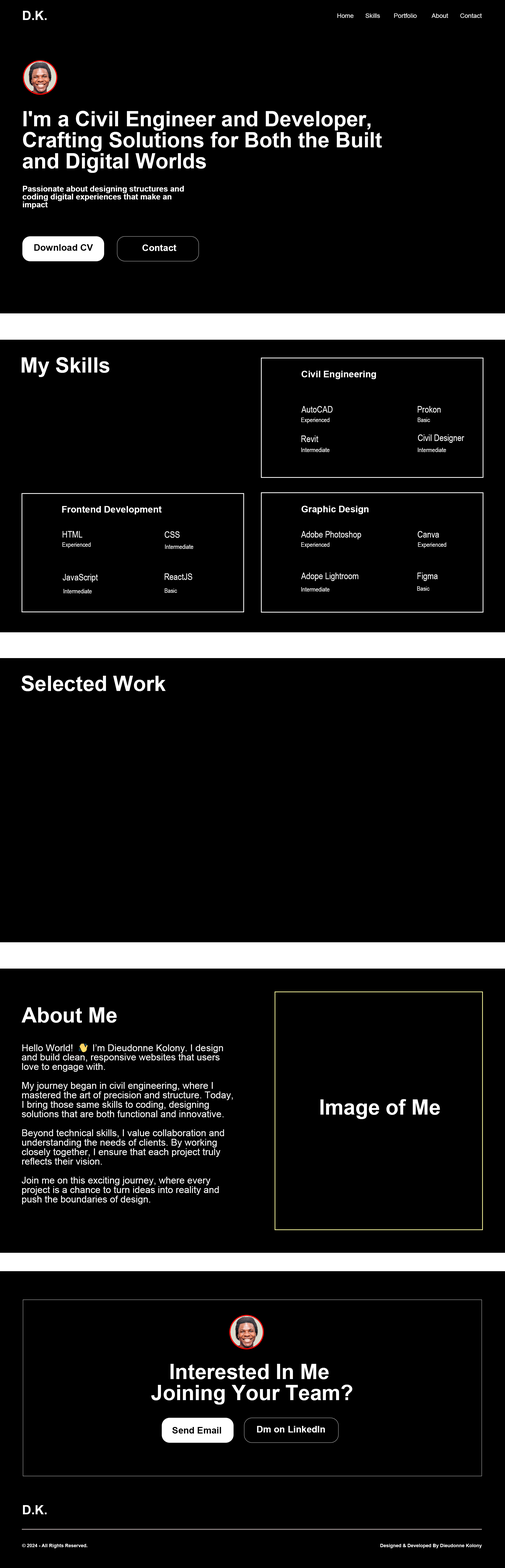
<style>
.page{position:relative;width:505px;height:1568px;background:#000000}
.page>*{position:absolute;margin:0}
.t1{font:12.6px "Arial-BoldMT";color:#ffffff}
.t2{font:6.3px "ArialMT";color:#ffffff}
.t3{font:21.1px/21.1px "Arial-BoldMT";color:#ffffff}
.t4{font:7.9px/7.9px "Arial-BoldMT";color:#ffffff}
.t5{font:9.2px "Arial-BoldMT";color:#000000}
.t6{font:9.2px "Arial-BoldMT";color:#ffffff}
.t7{font:21.1px "Arial-BoldMT";color:#ffffff}
.t8{font:9.2px "ArialNarrow";color:#ffffff}
.t9{font:6.3px "ArialNarrow";color:#ffffff}
.t10{font:9.5px/9.5px "ArialMT";color:#ffffff}
.t11{font:9.5px/9.5px "EmojiOneColor";color:#ffffff}
.t12{font:4.7px "Arial-BoldMT";color:#ffffff}
</style>
<div class="page">
<p class="t1" style="left:23px;top:11px;width:24px;height:9px">D.K.</p>
<p class="t2" style="left:337px;top:13px;width:145px;height:5px">Home   Skills  Portfolio  About  Contact</p>
<p class="t3" style="left:23px;top:111px;width:359px;height:62px">I'm a Civil Engineer and Developer, Crafting Solutions for Both the Built and Digital Worlds</p>
<p class="t4" style="left:23px;top:186px;width:161px;height:23px">Passionate about designing structures and coding digital experiences that make an impact</p>
<p class="t4" style="left:23px;top:186px;width:161px;height:23px">Passionate about designing structures and coding digital experiences that make an impact</p>
<p class="t5" style="left:34px;top:244px;width:59px;height:7px">Download CV</p>
<p class="t6" style="left:142px;top:244px;width:35px;height:7px">Contact</p>
<p class="t7" style="left:22px;top:357px;width:87px;height:20px">My Skills</p>
<p class="t6" style="left:302px;top:371px;width:74px;height:8px">Civil Engineering</p>
<p class="t8" style="left:302px;top:406px;width:31px;height:7px">AutoCAD</p>
<p class="t8" style="left:418px;top:406px;width:23px;height:7px">Prokon</p>
<p class="t9" style="left:301px;top:418px;width:29px;height:5px">Experienced</p>
<p class="t9" style="left:418px;top:418px;width:12px;height:4px">Basic</p>
<p class="t8" style="left:302px;top:435px;width:16px;height:7px">Revit</p>
<p class="t8" style="left:418px;top:434px;width:46px;height:9px">Civil Designer</p>
<p class="t9" style="left:301px;top:448px;width:29px;height:4px">Intermediate</p>
<p class="t9" style="left:418px;top:448px;width:28px;height:4px">Intermediate</p>
<p class="t6" style="left:62px;top:506px;width:100px;height:8px">Frontend Development</p>
<p class="t6" style="left:302px;top:506px;width:67px;height:8px">Graphic Design</p>
<p class="t8" style="left:63px;top:531px;width:19px;height:7px">HTML</p>
<p class="t8" style="left:165px;top:531px;width:15px;height:7px">CSS</p>
<p class="t8" style="left:301px;top:531px;width:60px;height:8px">Adobe Photoshop</p>
<p class="t8" style="left:418px;top:531px;width:21px;height:7px">Canva</p>
<p class="t9" style="left:62px;top:542px;width:29px;height:6px">Experienced</p>
<p class="t9" style="left:165px;top:544px;width:28px;height:5px">Intermediate</p>
<p class="t9" style="left:301px;top:542px;width:29px;height:6px">Experienced</p>
<p class="t9" style="left:418px;top:542px;width:29px;height:6px">Experienced</p>
<p class="t8" style="left:63px;top:574px;width:35px;height:8px">JavaScript</p>
<p class="t8" style="left:165px;top:573px;width:27px;height:7px">ReactJS</p>
<p class="t8" style="left:301px;top:573px;width:58px;height:8px">Adope Lightroom</p>
<p class="t8" style="left:418px;top:573px;width:20px;height:8px">Figma</p>
<p class="t9" style="left:63px;top:589px;width:29px;height:4px">Intermediate</p>
<p class="t9" style="left:165px;top:588px;width:12px;height:5px">Basic</p>
<p class="t9" style="left:301px;top:587px;width:29px;height:5px">Intermediate</p>
<p class="t9" style="left:417px;top:586px;width:13px;height:5px">Basic</p>
<p class="t7" style="left:21px;top:675px;width:145px;height:16px">Selected Work</p>
<p class="t7" style="left:22px;top:1007px;width:95px;height:16px">About Me</p>
<p class="t10" style="left:22px;top:1043px;width:211px;height:161px">Hello World!  <span class="t11">👋 </span> I’m Dieudonne Kolony. I design and build clean, responsive websites that users love to engage with.<br><br>My journey began in civil engineering, where I mastered the art of precision and structure. Today, I bring those same skills to coding, designing solutions that are both functional and innovative.<br><br>Beyond technical skills, I value collaboration and understanding the needs of clients. By working closely together, I ensure that each project truly reflects their vision.<br><br>Join me on this exciting journey, where every project is a chance to turn ideas into reality and push the boundaries of design.</p>
<p class="t7" style="left:320px;top:1099px;width:120px;height:20px">Image of Me</p>
<p class="t3" style="left:151px;top:1364px;width:202px;height:41px;text-align:center">Interested In Me <br>Joining Your Team?</p>
<p class="t5" style="left:172px;top:1427px;width:49px;height:7px">Send Email</p>
<p class="t6" style="left:257px;top:1426px;width:68px;height:6px">Dm on LinkedIn</p>
<p class="t1" style="left:23px;top:1505px;width:24px;height:9px">D.K.</p>
<p class="t12" style="left:22px;top:1544px;width:65px;height:4px">© 2024 - All Rights Reserved.</p>
<p class="t12" style="left:380px;top:1544px;width:102px;height:4px">Designed &amp; Developed By Dieudonne Kolony</p>
</div>
